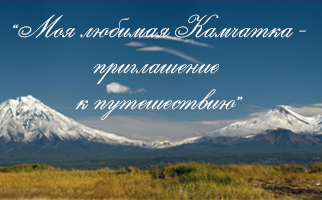
<style>
.page{position:relative;width:322px;height:200px}
.page>*{position:absolute;margin:0}
.t1{font:30px "EnglishScript";color:#ffffff}
</style>
<div class="page">
<p class="t1" style="left:13px;top:14px;width:293px;height:106px;text-align:center">“Моя любимая Камчатка -<br>приглашение <br>к путешествию”</p>
</div>
